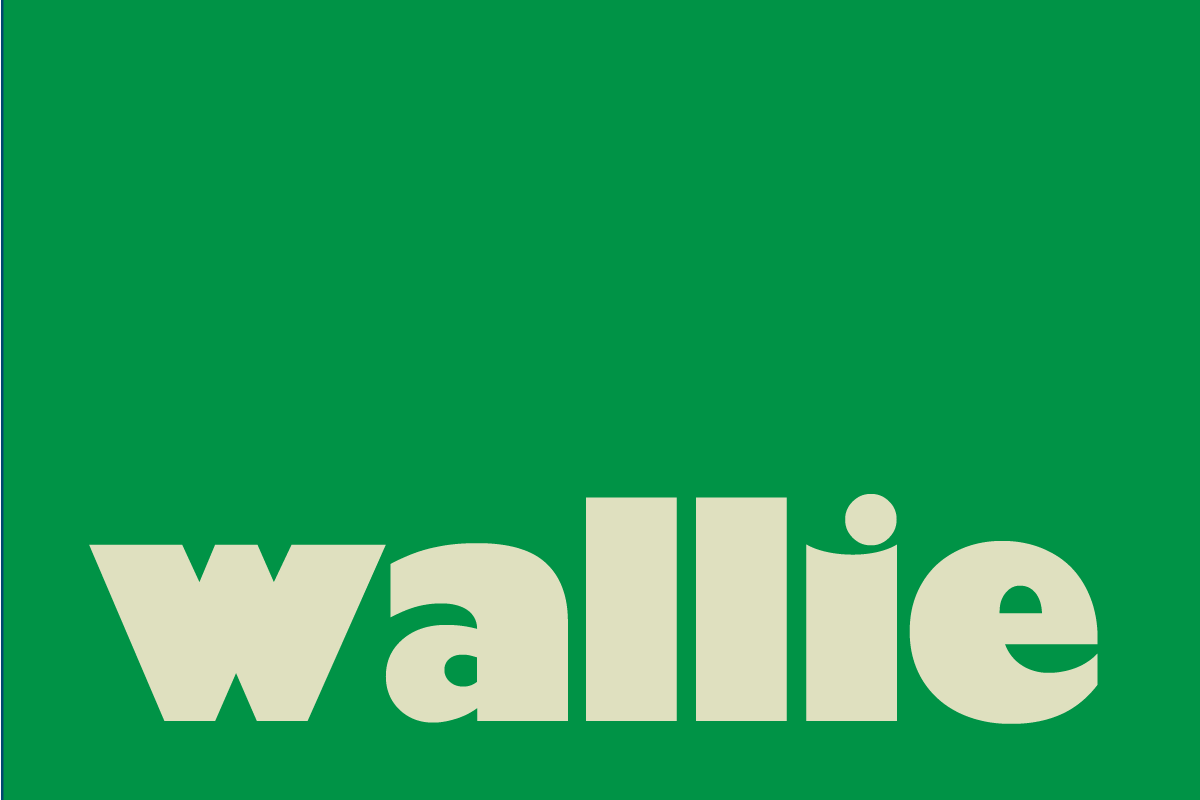
<style>
.page{position:relative;width:1200px;height:800px;background:#009346}
.page>*{position:absolute;margin:0}
.t1{font:300px "GillSans-UltraBold";letter-spacing:-0.05em;color:#dfe0bf}
</style>
<div class="page">
<p class="t1" style="left:89px;top:494px;width:1009px;height:230px">wallie</p>
</div>
